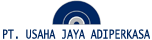
<style>
.page{position:relative;width:152px;height:40px;background:#ffffff}
.page>*{position:absolute;margin:0}
.t1{font:12.2px "LucidaSans-Typewriter";color:#002760;scale:0.81 1}
</style>
<div class="page">
<p class="t1" style="left:3px;top:29px;width:147px;height:10px">PT. USAHA JAYA ADIPERKASA</p>
</div>
